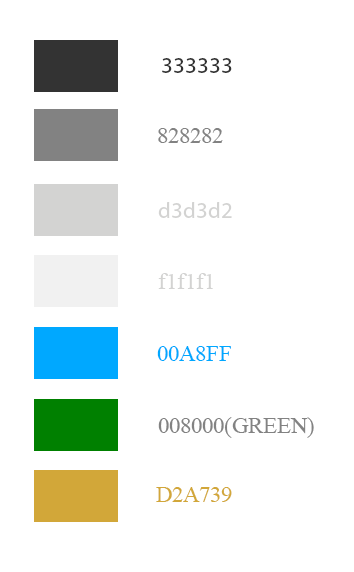
<style>
.page{position:relative;width:354px;height:572px;background:#ffffff}
.page>*{position:absolute;margin:0}
.t1{font:22.6px "MyriadPro-Regular";color:#333333}
.t2{font:22.6px "TimesNewRomanPSMT";color:#828282}
.t3{font:22.6px "MyriadPro-Regular";color:#d3d3d2}
.t4{font:22.6px "TimesNewRomanPSMT";color:#d3d3d2}
.t5{font:22.6px "TimesNewRomanPSMT";color:#00a8ff;text-transform:uppercase}
.t6{font:22.6px "TimesNewRomanPSMT";color:#828282;text-transform:uppercase}
.t7{font:22.6px "TimesNewRomanPSMT";color:#d2a739;text-transform:uppercase}
</style>
<div class="page">
<p class="t1" style="left:162px;top:58px;width:70px;height:15px">333333</p>
<p class="t2" style="left:158px;top:128px;width:65px;height:15px">828282</p>
<p class="t3" style="left:158px;top:202px;width:74px;height:16px">d3d3d2</p>
<p class="t4" style="left:158px;top:273px;width:55px;height:16px">f1f1f1</p>
<p class="t5" style="left:157px;top:346px;width:74px;height:15px">00a8ff</p>
<p class="t6" style="left:158px;top:417px;width:156px;height:21px">008000(green)</p>
<p class="t7" style="left:156px;top:487px;width:76px;height:15px">d2a739</p>
</div>
